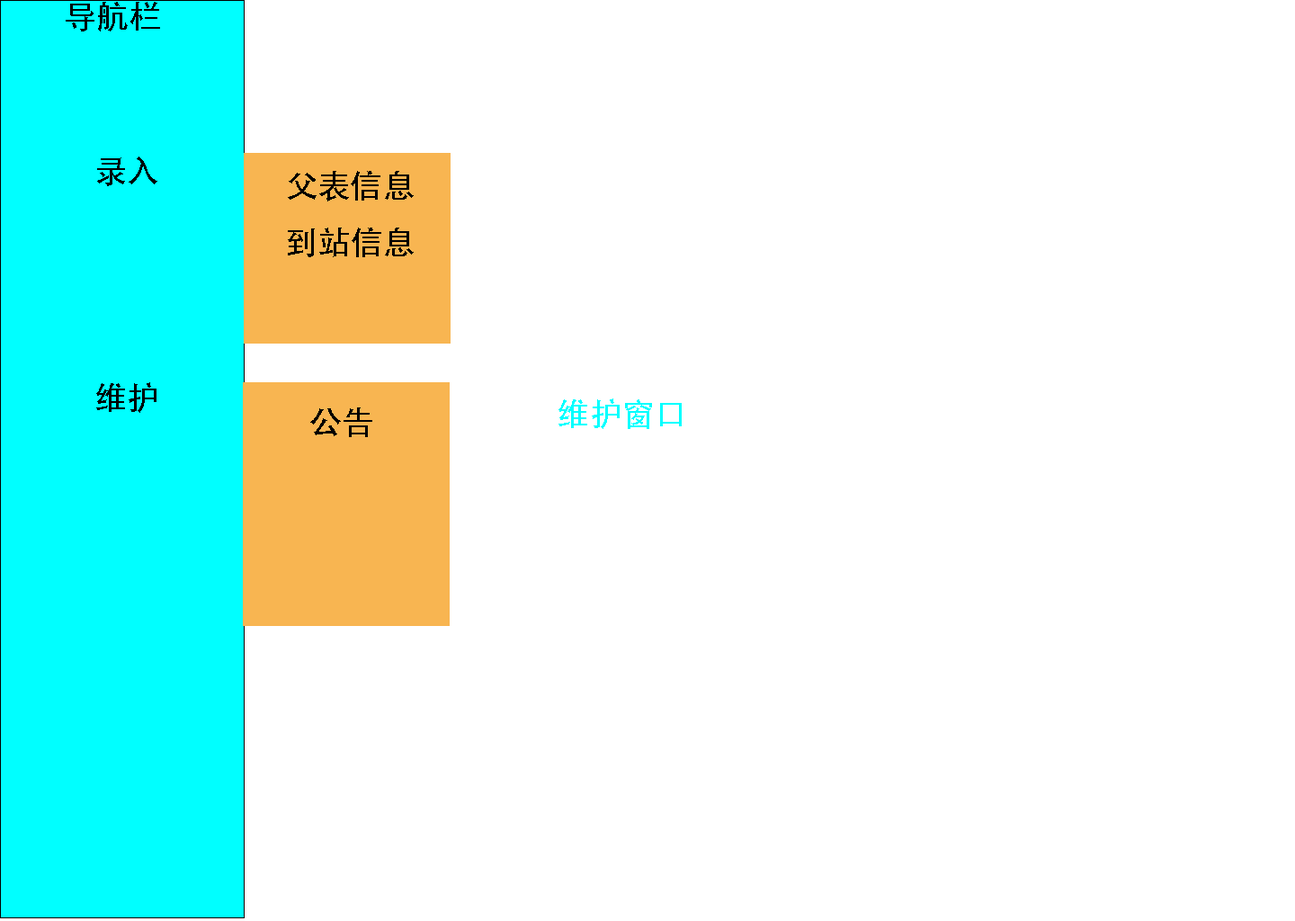
<style>
.page{position:relative;width:1295px;height:921px;background:#ffffff}
.page>*{position:absolute;margin:0}
.t1{font:32.4px "AdobeHeitiStd-Regular";color:#000000}
.t2{font:32.4px "AdobeHeitiStd-Regular";color:#00ffff}
</style>
<div class="page">
<p class="t1" style="left:66px;top:2px;width:94px;height:29px">导航栏</p>
<p class="t1" style="left:96px;top:156px;width:61px;height:257px;text-align:center">录入<br><br><br><br>维护</p>
<p class="t1" style="left:288px;top:171px;width:126px;height:86px;text-align:center">父表信息<br>到站信息</p>
<p class="t2" style="left:558px;top:398px;width:124px;height:31px">维护窗口</p>
<p class="t1" style="left:310px;top:407px;width:62px;height:30px">公告</p>
</div>
